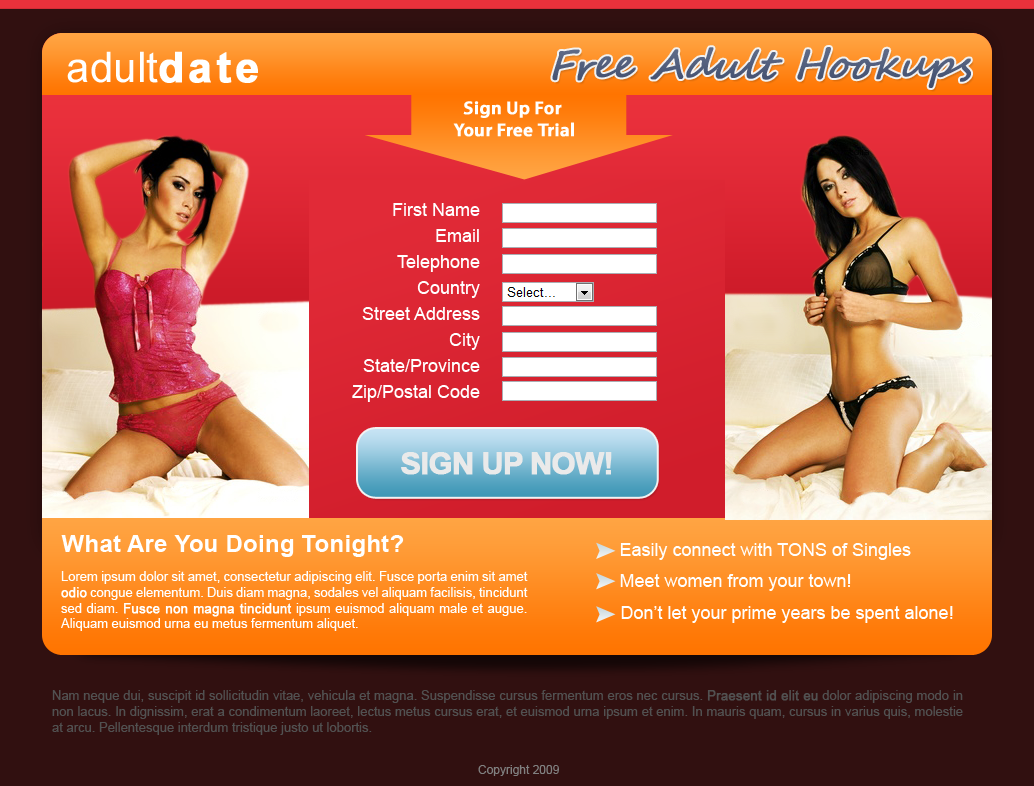
<style>
.page{position:relative;width:1034px;height:786px}
.page>*{position:absolute;margin:0}
.t1{font:42px "ArialMT";color:#ffffff}
.t2{font:42px "Arial-BoldMT";letter-spacing:0.09em;color:#ffffff;font-weight:bold}
.t3{font:39.1px "SegoeScript";color:#505c7a;font-weight:bold;font-style:italic}
.t4{font:18.6px "Vegur-Bold";color:#ffffff;font-weight:bold}
.t5{font:18px/26px "ArialMT";color:#ffffff}
.t6{font:30.9px "Arial-BoldMT";letter-spacing:-0.05em;color:#eaeaea;font-weight:bold}
.t7{font:24px "Arial-BoldMT";letter-spacing:0.01em;color:#ffffff}
.t8{font:18px "ArialMT";color:#ffffff}
.t9{font:13px "ArialMT";color:#ffffff}
.t10{font:13px "ArialMT";color:#ffffff;font-weight:bold}
.t11{font:13px "ArialMT";color:#515151}
.t12{font:13px "ArialMT";color:#515151;font-weight:bold}
.t13{font:12px "ArialMT";color:#808080}
</style>
<div class="page">
<p class="t1" style="left:67px;top:51px;width:91px;height:32px">adult</p>
<p class="t2" style="left:159px;top:51px;width:99px;height:32px">date</p>
<p class="t3" style="left:552px;top:47px;width:419px;height:41px">Free Adult Hookups</p>
<p class="t4" style="left:453px;top:101px;width:121px;height:36px;text-align:center">Sign Up For <br>Your Free Trial</p>
<p class="t5" style="left:352px;top:203px;width:128px;height:199px;text-align:right">First Name<br>Email<br>Telephone<br>Country<br>Street Address<br>City<br>State/Province<br>Zip/Postal Code</p>
<p class="t6" style="left:401px;top:452px;width:211px;height:23px">SIGN UP NOW!</p>
<p class="t7" style="left:61px;top:535px;width:343px;height:22px">What Are You Doing Tonight?</p>
<p class="t8" style="left:620px;top:543px;width:291px;height:17px">Easily connect with TONS of Singles</p>
<p class="t9" style="left:61px;top:571px;width:467px;height:60px;text-align:justify">Lorem ipsum dolor sit amet, consectetur adipiscing elit. Fusce porta enim sit amet <span class="t10">odio</span> congue elementum. Duis diam magna, sodales vel aliquam facilisis, tincidunt sed diam. <span class="t10">Fusce non magna tincidunt</span> ipsum euismod aliquam male et augue. Aliquam euismod urna eu metus fermentum aliquet.</p>
<p class="t8" style="left:620px;top:574px;width:231px;height:17px">Meet women from your town!</p>
<p class="t8" style="left:621px;top:606px;width:332px;height:17px">Don’t let your prime years be spent alone!</p>
<p class="t11" style="left:52px;top:690px;width:911px;height:45px;text-align:justify">Nam neque dui, suscipit id sollicitudin vitae, vehicula et magna. Suspendisse cursus fermentum eros nec cursus. <span class="t12">Praesent id elit eu</span> dolor adipiscing modo in non lacus. In dignissim, erat a condimentum laoreet, lectus metus cursus erat, et euismod urna ipsum et enim. In mauris quam, cursus in varius quis, molestie at arcu. Pellentesque interdum tristique justo ut lobortis.</p>
<p class="t13" style="left:478px;top:765px;width:81px;height:11px">Copyright 2009</p>
</div>
